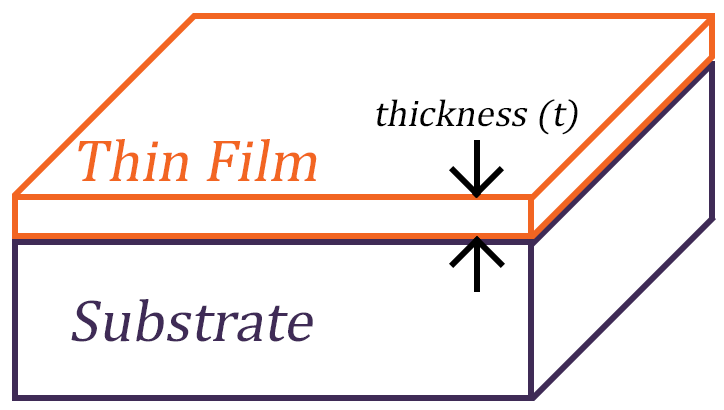
<style>
.page{position:relative;width:724px;height:410px;background:#ffffff}
.page>*{position:absolute;margin:0}
.t1{font:38px "CambriaMath";color:#000000;font-style:italic}
.t2{font:60px "CambriaMath";color:#f26522;font-style:italic}
.t3{font:60px "CambriaMath";color:#3f2b56;font-style:italic}
</style>
<div class="page">
<p class="t1" style="left:376px;top:99px;width:202px;height:36px">thickness (t)</p>
<p class="t2" style="left:78px;top:139px;width:239px;height:42px">Thin Film</p>
<p class="t3" style="left:71px;top:299px;width:242px;height:43px">Substrate</p>
</div>
